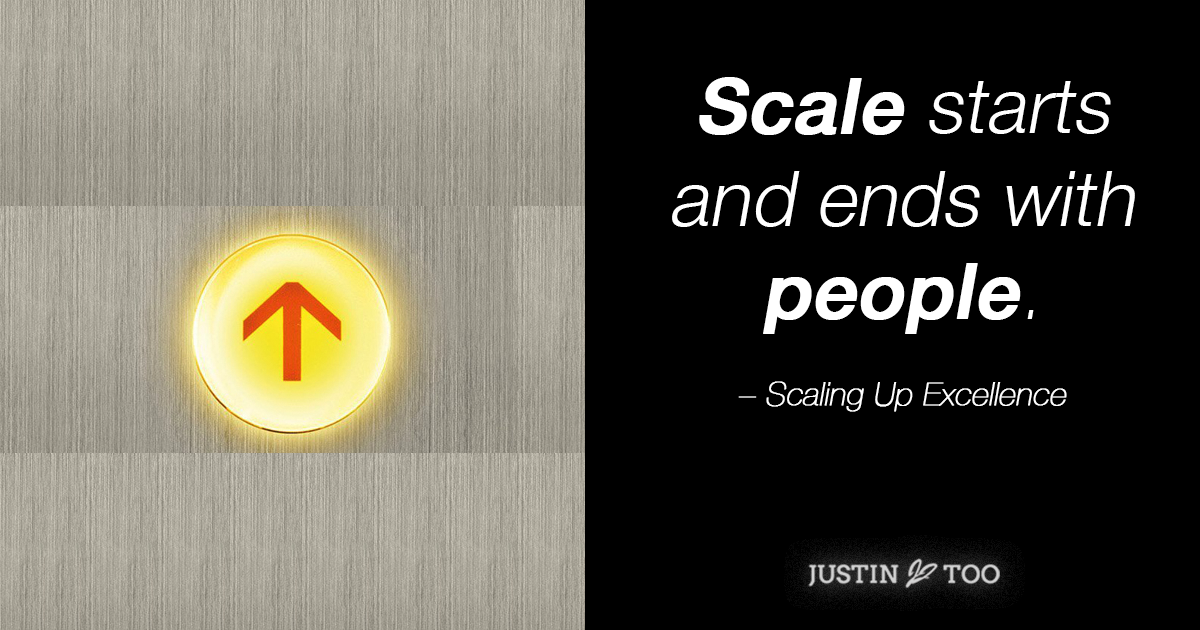
<style>
.page{position:relative;width:1200px;height:630px;background:#000000}
.page>*{position:absolute;margin:0}
.t1{font:32px "HelveticaNeue-UltraLight";color:#ffffff;font-weight:bold;font-style:italic}
.t2{font:77px "HelveticaNeue-Medium";color:#ffffff;font-weight:bold;font-style:italic}
.t3{font:77px "HelveticaNeue-Light";color:#ffffff;font-style:italic}
.t4{font:77px "HelveticaNeue-UltraLight";color:#ffffff;font-weight:bold;font-style:italic}
</style>
<div class="page">
<p class="t1" style="left:672px;top:77px;width:463px;height:335px;text-align:center"><span class="t2">Scale </span><span class="t3">starts and ends with </span><span class="t2">people</span><span class="t4">.<br><br></span>– Scaling Up Excellence</p>
</div>
